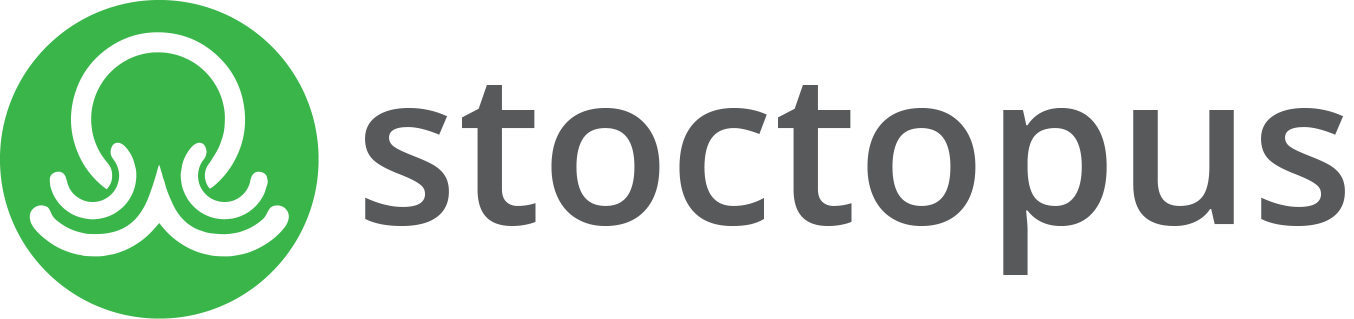
<style>
.page{position:relative;width:1354px;height:319px;background:#ffffff}
.page>*{position:absolute;margin:0}
.t1{font:210.9px "OpenSans-SemiBold";color:#58595b}
</style>
<div class="page">
<p class="t1" style="left:365px;top:85px;width:980px;height:190px">stoctopus</p>
</div>
